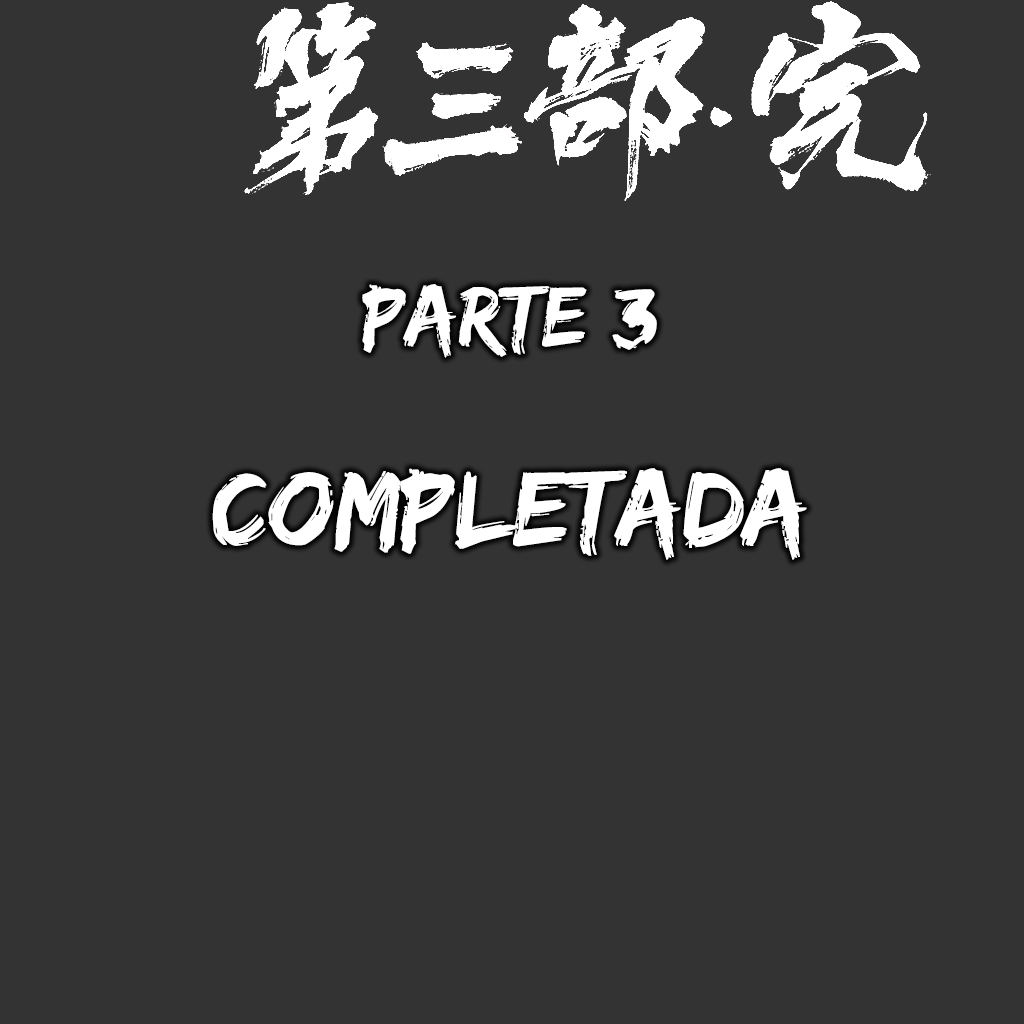
<style>
.page{position:relative;width:1024px;height:1024px;background:#333333}
.page>*{position:absolute;margin:0}
.t1{font:88.5px "EdoSZ";color:#ffffff}
.t2{font:109.9px "EdoSZ";color:#ffffff}
</style>
<div class="page">
<p class="t1" style="left:362px;top:284px;width:295px;height:74px">parte 3</p>
<p class="t2" style="left:212px;top:468px;width:595px;height:92px">COMPLETADA</p>
</div>
